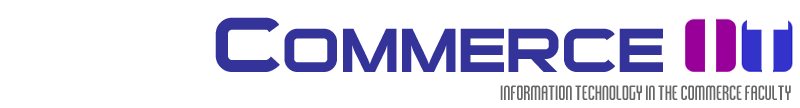
<style>
.page{position:relative;width:800px;height:108px;background:#ffffff}
.page>*{position:absolute;margin:0}
.t1{font:60px "SuiGeneris";color:#333399}
.t2{font:75px "SuiGeneris";color:#333399}
.t3{font:20px "Tangerine-XCnTim2";color:#666666}
</style>
<div class="page">
<p class="t1" style="left:215px;top:17px;width:448px;height:55px"><span class="t2">C</span>OMMERCE</p>
<p class="t3" style="left:500px;top:85px;width:291px;height:15px">Information Technology in the Commerce Faculty</p>
</div>
